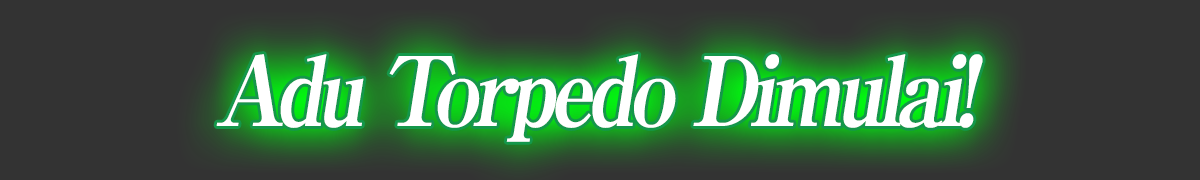
<style>
.page{position:relative;width:1200px;height:180px;background:#333333}
.page>*{position:absolute;margin:0}
.t1{font:96px "RyuminPro-ExBold";letter-spacing:-0.08em;color:#ffffff;font-style:italic;scale:0.9 1}
</style>
<div class="page">
<p class="t1" style="left:216px;top:54px;width:767px;height:88px">Adu Torpedo Dimulai!</p>
</div>
